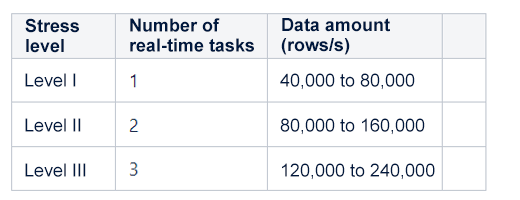
<style>
.page{position:relative;width:520px;height:200px;background:#ffffff}
.page>*{position:absolute;margin:0}
.t1{font:18px/20px "Arial-BoldMT";color:#00183e}
.t2{font:18px/45px "ArialMT";color:#00183e}
</style>
<div class="page">
<p class="t1" style="left:25px;top:18px;width:54px;height:35px">Stress level</p>
<p class="t1" style="left:130px;top:18px;width:124px;height:34px">Number of real-time tasks</p>
<p class="t1" style="left:281px;top:18px;width:109px;height:37px">Data amount (rows/s)</p>
<p class="t2" style="left:25px;top:73px;width:61px;height:104px">Level I<br>Level II<br>Level III</p>
<p class="t2" style="left:280px;top:73px;width:155px;height:107px">40,000 to 80,000<br>80,000 to 160,000<br>120,000 to 240,000</p>
</div>
